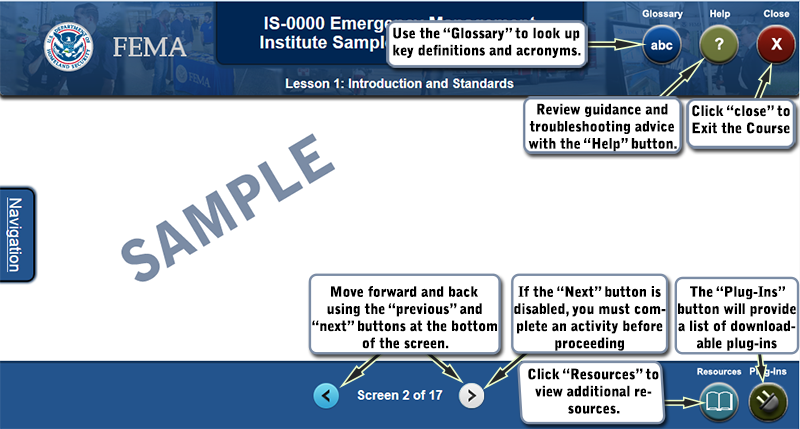
<style>
.page{position:relative;width:800px;height:429px;background:#ffffff}
.page>*{position:absolute;margin:0}
.t1{font:14.3px "BellGothicStd-Black";color:#000000}
.t2{font:14.3px "BellGothicStd-Black";color:#010101}
</style>
<div class="page">
<p class="t1" style="left:393px;top:27px;width:188px;height:31px;text-align:center">Use the “Glossary” to look up key definitions and acronyms.</p>
<p class="t2" style="left:528px;top:103px;width:149px;height:49px;text-align:center">Review guidance and troubleshooting advice with the “Help” button.</p>
<p class="t1" style="left:692px;top:105px;width:98px;height:29px;text-align:center">Click “close” to Exit the Course</p>
<p class="t1" style="left:312px;top:286px;width:185px;height:63px;text-align:center">Move forward and back using the “previous” and “next” buttons at the bottom of the screen.</p>
<p class="t1" style="left:514px;top:286px;width:152px;height:65px;text-align:center">If the “Next” button is disabled, you must complete an activity before proceeding</p>
<p class="t1" style="left:678px;top:286px;width:118px;height:65px;text-align:center">The “Plug-Ins” button will provide a list of downloadable plug-ins</p>
<p class="t1" style="left:528px;top:368px;width:131px;height:46px;text-align:center">Click “Resources” to view additional resources.</p>
</div>
